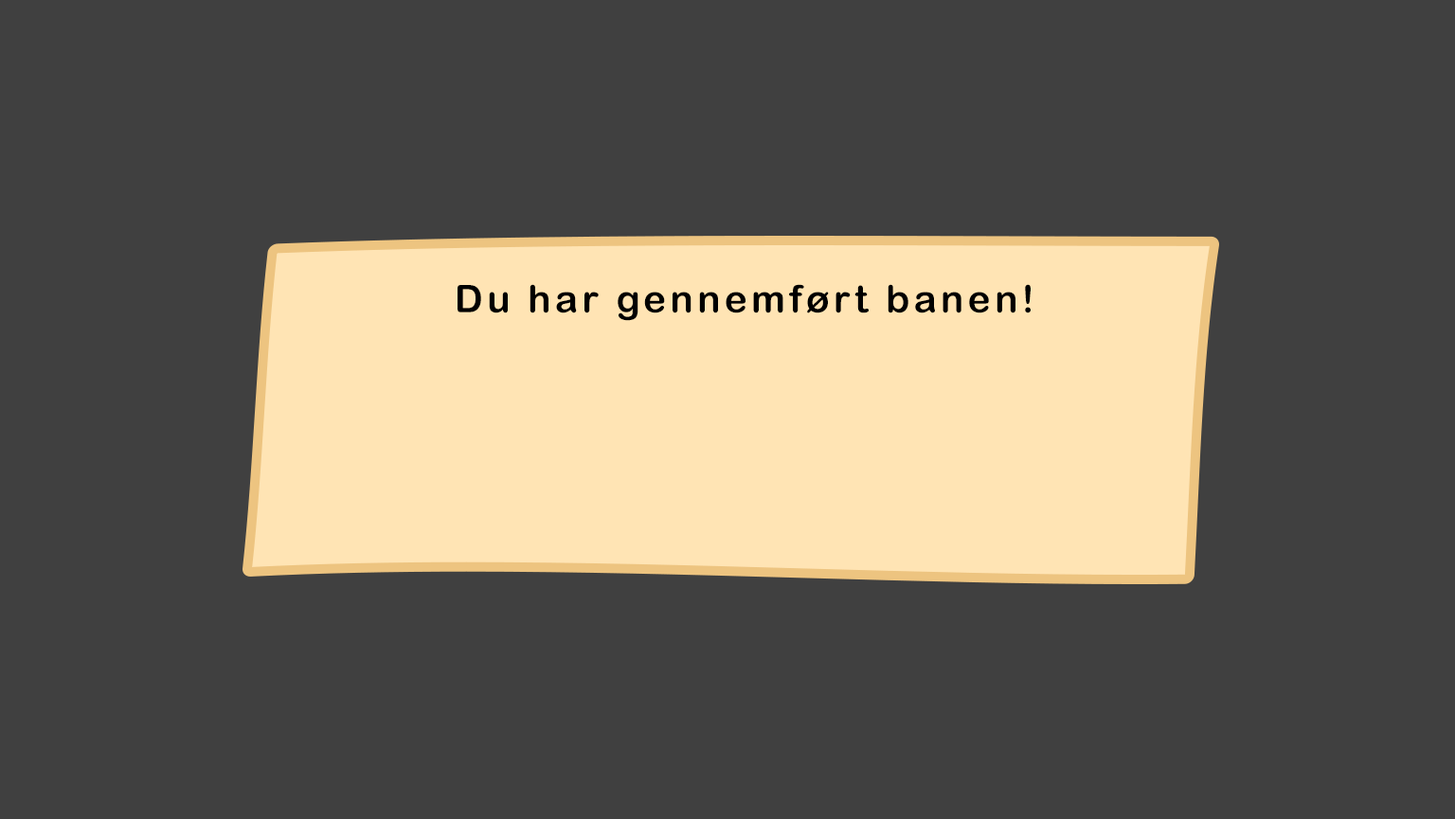
<style>
.page{position:relative;width:1455px;height:819px;background:#404040}
.page>*{position:absolute;margin:0}
.t1{font:37.9px "ArialRoundedMTBold";letter-spacing:0.1em;color:#000000}
</style>
<div class="page">
<p class="t1" style="left:458px;top:284px;width:573px;height:37px">Du har gennemført banen!</p>
</div>
